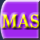
<style>
.page{position:relative;width:40px;height:40px;background:#a027ef}
.page>*{position:absolute;margin:0}
.t1{font:18px "MyungjoXB-HM"}
</style>
<div class="page">
<p class="t1" style="left:2px;top:14px;width:38px;height:14px">MAS</p>
</div>
